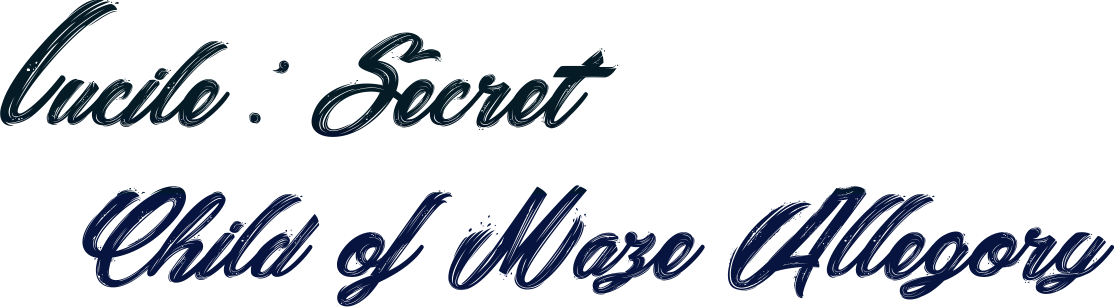
<style>
.page{position:relative;width:1114px;height:307px;background:#ffffff}
.page>*{position:absolute;margin:0}
.t1{font:127.9px "SnowballsCityPersonalUseOnly"}
.t2{font:193.2px "SnowballsCityPersonalUseOnly"}
</style>
<div class="page">
<p class="t1" style="left:0px;top:0px;width:1115px;height:307px"><span class="t2">l</span>ucile. Secret <br>  Child of Maze Allegory</p>
</div>
